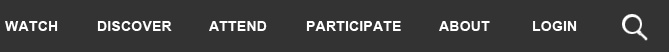
<style>
.page{position:relative;width:669px;height:52px;background:#333333}
.page>*{position:absolute;margin:0}
.t1{font:14.3px "Arial-BoldMT";color:#ffffff}
</style>
<div class="page">
<p class="t1" style="left:5px;top:21px;width:53px;height:10px">WATCH</p>
<p class="t1" style="left:97px;top:21px;width:75px;height:10px">DISCOVER</p>
<p class="t1" style="left:209px;top:21px;width:58px;height:10px">ATTEND</p>
<p class="t1" style="left:306px;top:21px;width:95px;height:10px">PARTICIPATE</p>
<p class="t1" style="left:439px;top:21px;width:51px;height:10px">ABOUT</p>
<p class="t1" style="left:533px;top:21px;width:44px;height:10px">LOGIN</p>
</div>
